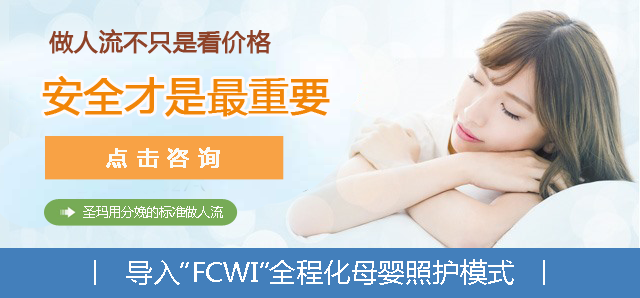
<style>
.page{position:relative;width:640px;height:298px}
.page>*{position:absolute;margin:0}
.t1{font:24px "MicrosoftYaHei";color:#8e4228;font-weight:bold}
.t2{font:40px "MicrosoftYaHei";color:#f18507;font-weight:bold}
.t3{font:21.3px "MicrosoftYaHei";letter-spacing:0.4em;color:#fbfbf6;font-weight:bold}
.t4{font:12.9px "MicrosoftYaHei";color:#fdfafa}
.t5{font:26.7px "MicrosoftYaHeiUI";letter-spacing:0.01em;color:#ffffff}
</style>
<div class="page">
<p class="t1" style="left:49px;top:29px;width:222px;height:25px">做人流不只是看价格</p>
<p class="t2" style="left:42px;top:76px;width:288px;height:41px">安全才是最重要</p>
<p class="t3" style="left:106px;top:147px;width:114px;height:21px">点击咨询</p>
<p class="t4" style="left:83px;top:206px;width:140px;height:12px">圣玛用分娩的标准做人流</p>
<p class="t5" style="left:94px;top:259px;width:451px;height:26px">丨  导入“FCWI”全程化母婴照护模式  丨</p>
</div>
